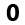
<style>
.page{position:relative;width:25px;height:25px;background:#ffffff}
.page>*{position:absolute;margin:0}
.t1{font:24px "NirmalaUI-Bold";color:#000000}
</style>
<div class="page">
<p class="t1" style="left:6px;top:4px;width:13px;height:17px">0</p>
</div>
